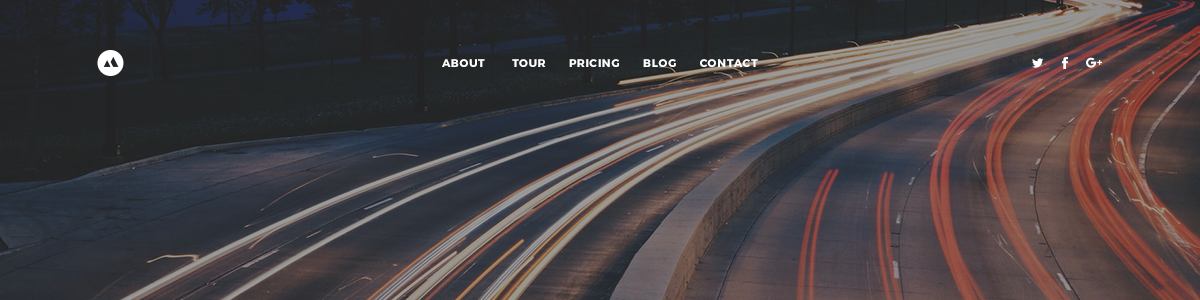
<style>
.page{position:relative;width:1200px;height:300px}
.page>*{position:absolute;margin:0}
.t1{font:11px "Montserrat-Bold";letter-spacing:0.07em;color:#ffffff;text-transform:uppercase}
</style>
<div class="page">
<p class="t1" style="left:442px;top:59px;width:316px;height:8px">About       Tour      Pricing      Blog      Contact</p>
</div>
